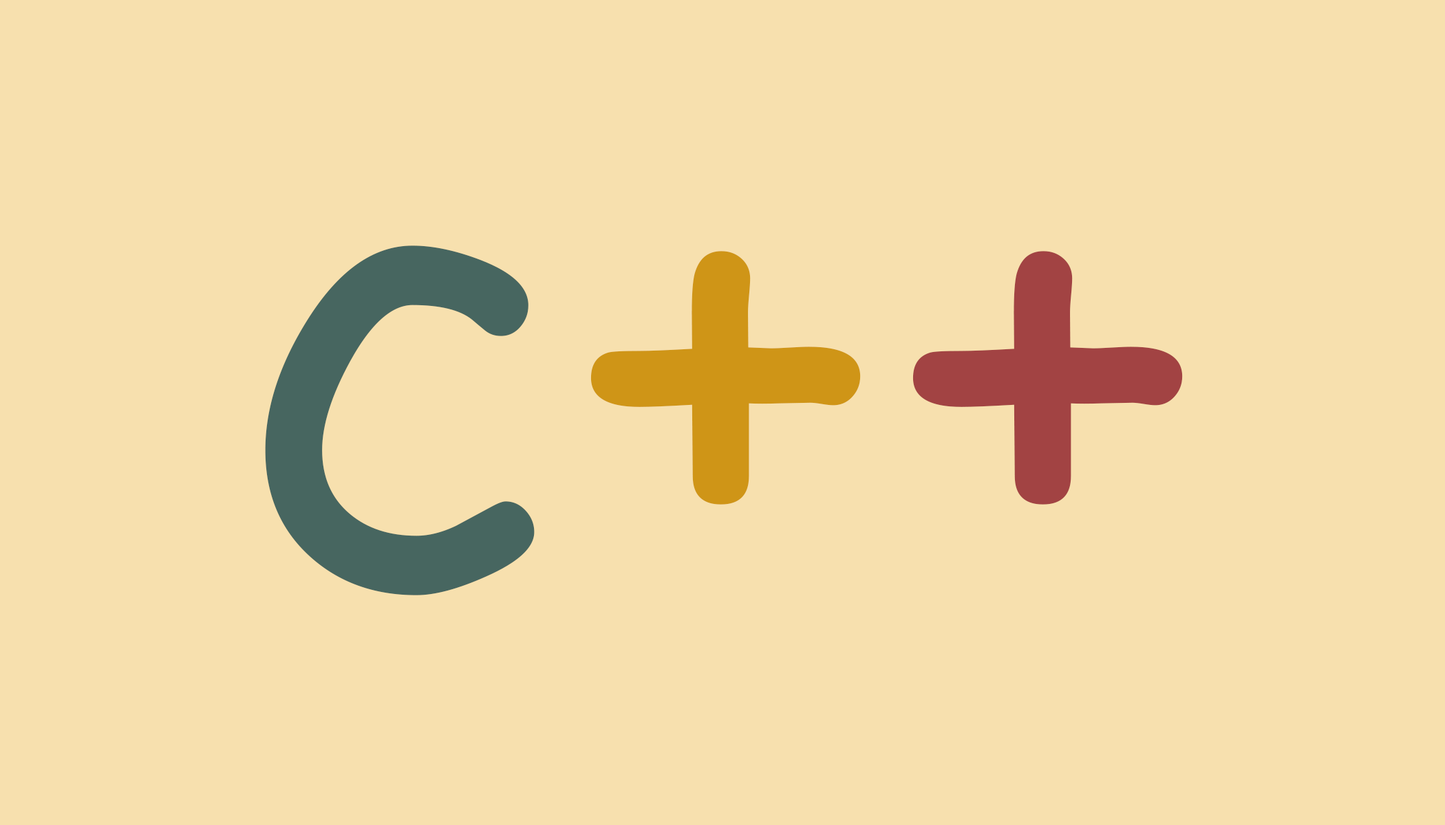
<style>
.page{position:relative;width:1445px;height:825px;background:#f7e0ae}
.page>*{position:absolute;margin:0}
.t1{font:634.9px "ComicSansMS";color:#476660;font-weight:bold}
.t2{font:634.9px "ComicSansMS";color:#cf9517;font-weight:bold}
.t3{font:634.9px "ComicSansMS";color:#a24343;font-weight:bold}
</style>
<div class="page">
<p class="t1" style="left:265px;top:246px;width:917px;height:350px">c<span class="t2">+</span><span class="t3">+</span></p>
</div>
